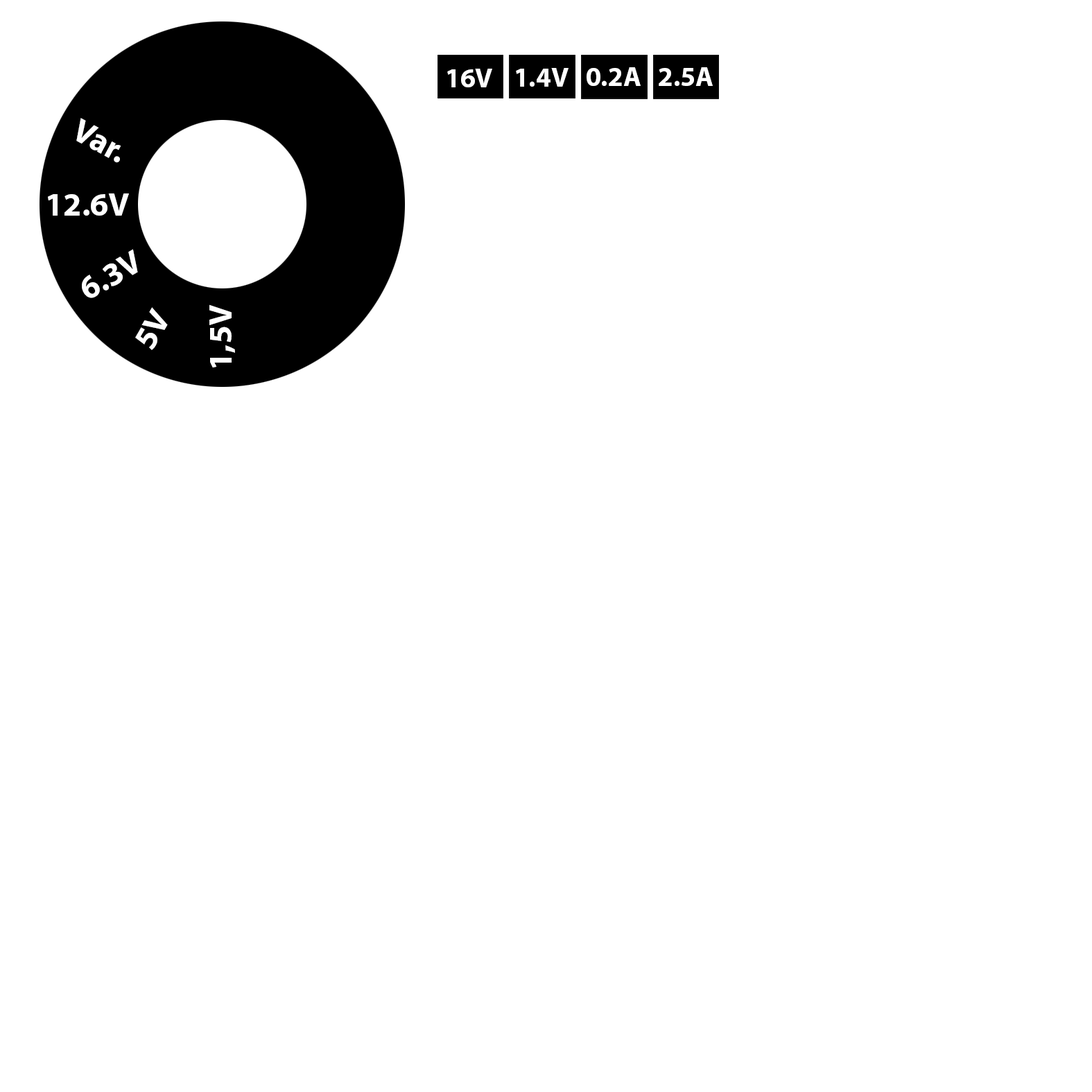
<style>
.page{position:relative;width:1092px;height:1092px;background:#ffffff}
.page>*{position:absolute;margin:0}
.t1{font:27.3px "MyriadPro-Bold";color:#ffffff}
.t2{font:32.8px "MyriadPro-Bold";color:#ffffff}
</style>
<div class="page">
<p class="t1" style="left:447px;top:69px;width:45px;height:18px">16V</p>
<p class="t1" style="left:516px;top:68px;width:53px;height:19px">1.4V</p>
<p class="t1" style="left:587px;top:67px;width:54px;height:19px">0.2A</p>
<p class="t1" style="left:659px;top:67px;width:54px;height:19px">2.5A</p>
<p class="t2" style="left:76px;top:118px;width:45px;height:45px;rotate:28deg">Var.</p>
<p class="t2" style="left:48px;top:193px;width:81px;height:23px">12.6V</p>
<p class="t2" style="left:82px;top:249px;width:56px;height:49px;rotate:-30deg">6.3V</p>
<p class="t2" style="left:209px;top:304px;width:26px;height:63px;rotate:-90deg">1,5V</p>
<p class="t2" style="left:135px;top:307px;width:33px;height:43px;rotate:-60deg">5V</p>
</div>
